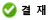
<style>
.page{position:relative;width:50px;height:20px;background:#ffffff}
.page>*{position:absolute;margin:0}
.t1{font:10px "MalgunGothicBold";letter-spacing:0.1em;color:#040404}
</style>
<div class="page">
<p class="t1" style="left:21px;top:5px;width:25px;height:11px">결 재</p>
</div>
